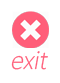
<style>
.page{position:relative;width:60px;height:83px;background:#ffffff}
.page>*{position:absolute;margin:0}
.t1{font:25.2px "SegoeUI-Light";color:#ff5e79;font-style:italic}
</style>
<div class="page">
<p class="t1" style="left:11px;top:51px;width:37px;height:19px">exit</p>
</div>
